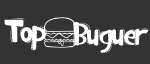
<style>
.page{position:relative;width:150px;height:64px;background:#333333}
.page>*{position:absolute;margin:0}
.t1{font:36px "Bestinclass";letter-spacing:-0.04em;color:#ffffff}
</style>
<div class="page">
<p class="t1" style="left:4px;top:18px;width:43px;height:33px">Top</p>
<p class="t1" style="left:73px;top:22px;width:76px;height:31px">Buguer</p>
</div>
